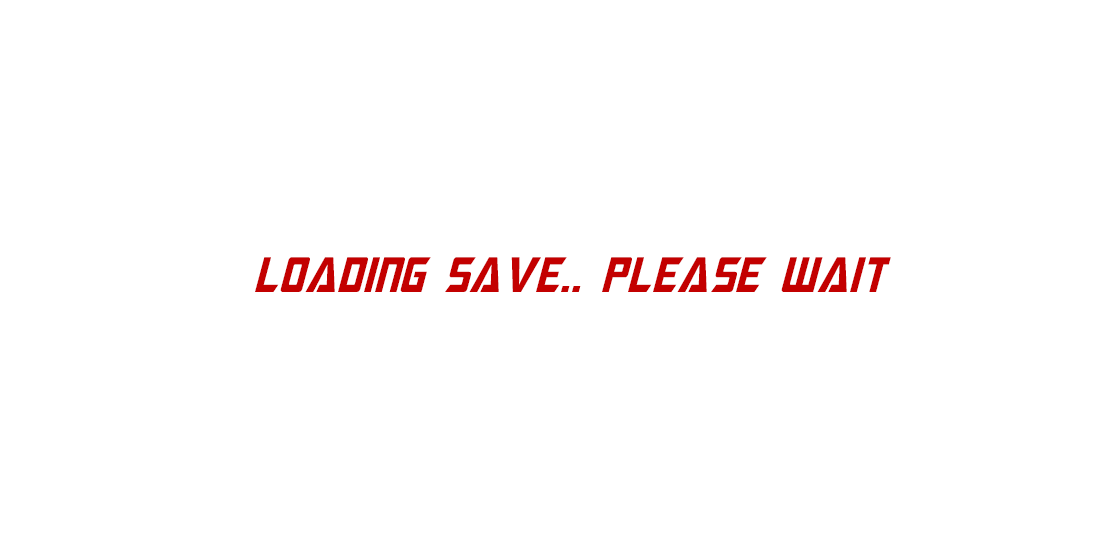
<style>
.page{position:relative;width:1100px;height:550px;background:#ffffff}
.page>*{position:absolute;margin:0}
.t1{font:12px "MegatronCondensed-Italic";color:#c30000}
</style>
<div class="page">
<p class="t1" style="left:255px;top:257px;width:636px;height:35px">loading save.. please wait</p>
</div>
